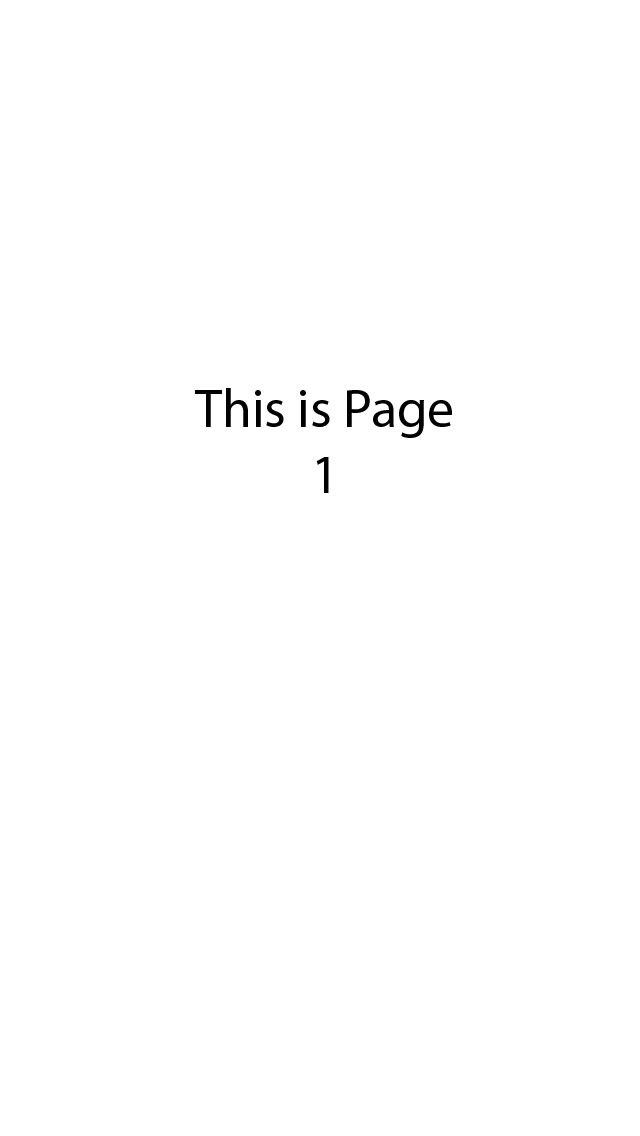
<style>
.page{position:relative;width:640px;height:1136px;background:#ffffff}
.page>*{position:absolute;margin:0}
.t1{font:54.3px "MyriadPro-Regular";color:#000000}
</style>
<div class="page">
<p class="t1" style="left:195px;top:388px;width:257px;height:105px;text-align:center">This is Page <br>1</p>
</div>
